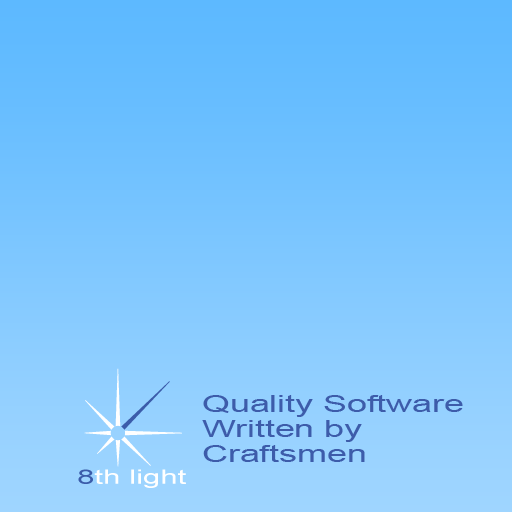
<style>
.page{position:relative;width:512px;height:512px}
.page>*{position:absolute;margin:0}
.t1{font:23.3px/25px "ArialMT";color:#3d5caa;scale:1.53 1}
</style>
<div class="page">
<p class="t1" style="left:202px;top:395px;width:261px;height:67px">Quality Software<br>Written by<br>Craftsmen</p>
</div>
